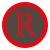
<style>
.page{position:relative;width:50px;height:50px;background:#534741}
.page>*{position:absolute;margin:0}
.t1{font:32.1px "PerpetuaTitlingMT-Light";color:#e70713}
</style>
<div class="page">
<p class="t1" style="left:16px;top:13px;width:21px;height:23px">R</p>
</div>
